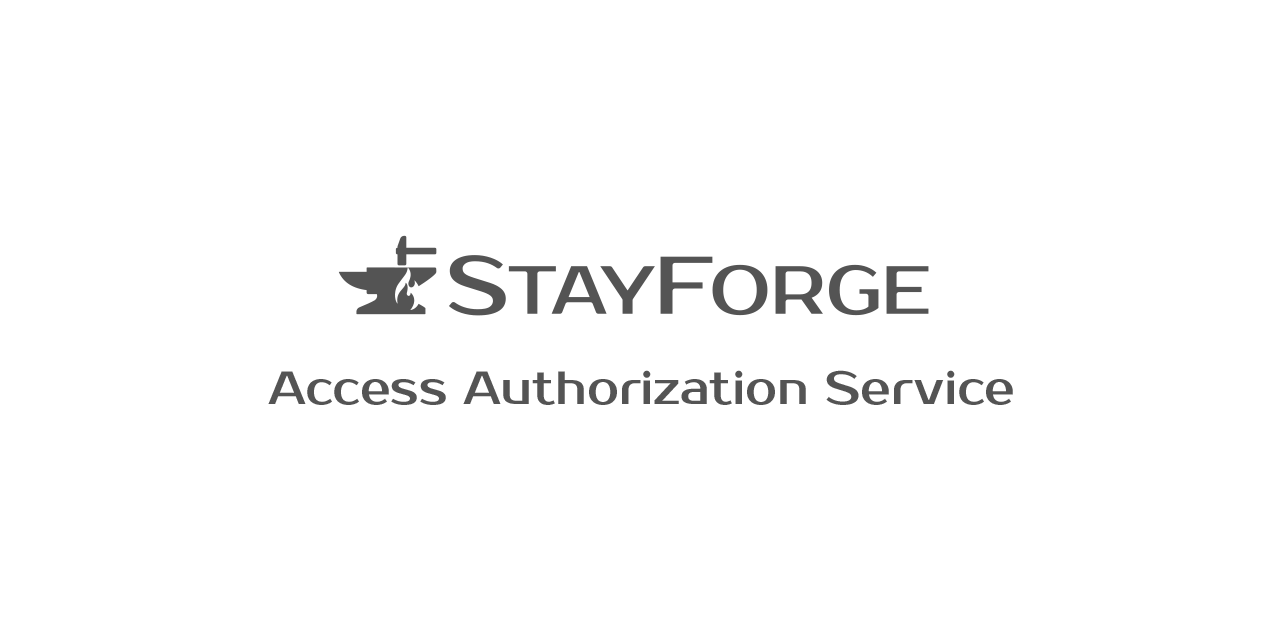
<style>
.page{position:relative;width:1280px;height:640px;background:#ffffff}
.page>*{position:absolute;margin:0}
.t1{font:46.2px "ProstoOne-Regular";color:#545454}
</style>
<div class="page">
<p class="t1" style="left:268px;top:370px;width:745px;height:35px">Access Authorization Service</p>
</div>
